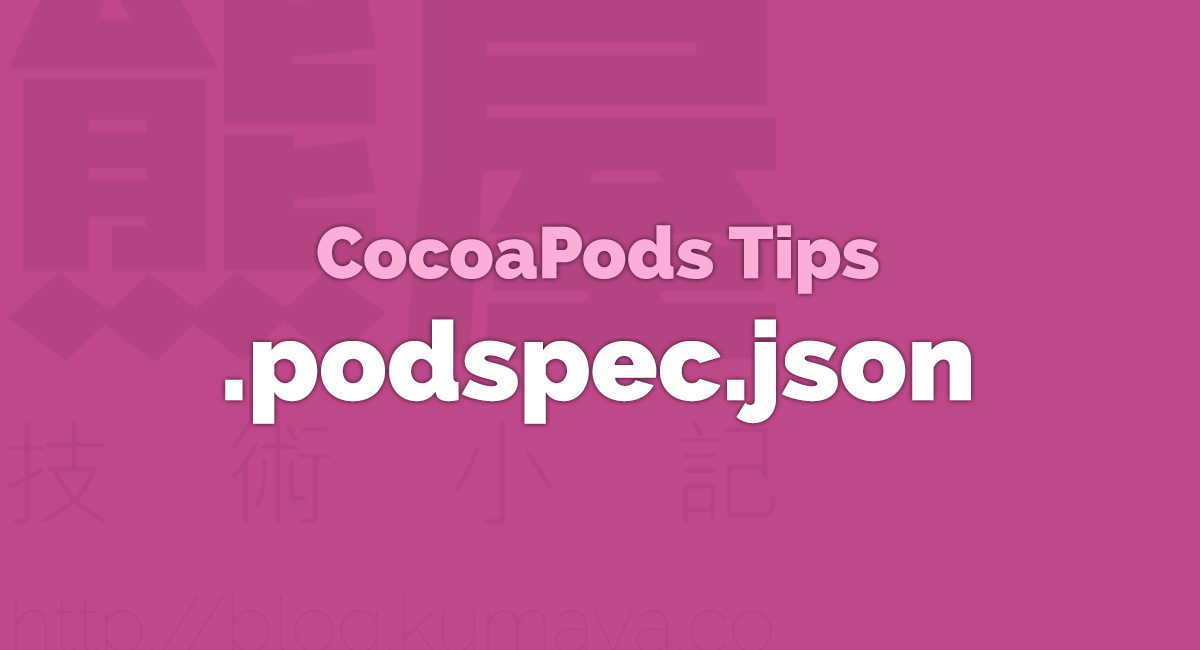
<style>
.page{position:relative;width:1200px;height:650px;background:#be4889}
.page>*{position:absolute;margin:0}
.t1{font:72.7px/84.4px "Raleway-Heavy";color:#fcaed8}
.t2{font:110.2px/121.9px "Raleway-Heavy";color:#ffffff}
</style>
<div class="page">
<p class="t1" style="left:225px;top:225px;width:746px;height:199px;text-align:center">CocoaPods Tips<br><span class="t2">.podspec.json</span></p>
</div>
